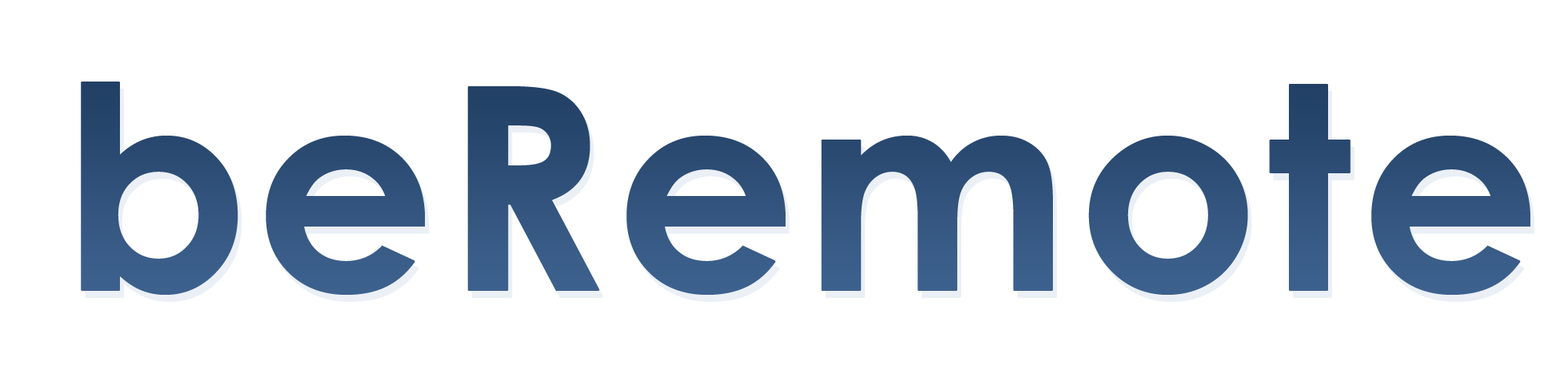
<style>
.page{position:relative;width:1568px;height:392px;background:#ffffff}
.page>*{position:absolute;margin:0}
.t1{font:282.2px "CenturyGothic-Bold";color:#32537d;font-weight:bold}
</style>
<div class="page">
<p class="t1" style="left:81px;top:82px;width:1449px;height:213px">beRemote</p>
</div>
